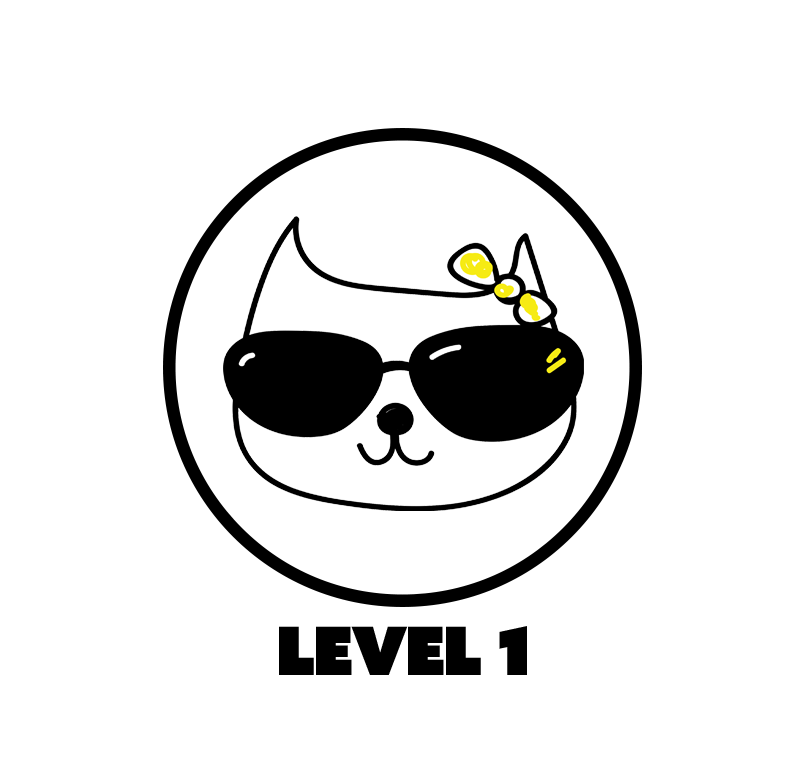
<style>
.page{position:relative;width:800px;height:781px;background:#ffffff}
.page>*{position:absolute;margin:0}
.t1{font:66.7px "AzoSansUber-Regular";letter-spacing:-0.04em;color:#000000}
</style>
<div class="page">
<p class="t1" style="left:279px;top:626px;width:248px;height:49px">Level 1</p>
</div>
